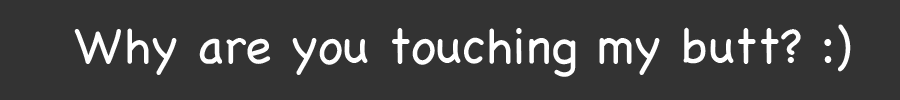
<style>
.page{position:relative;width:900px;height:100px;background:#333333}
.page>*{position:absolute;margin:0}
.t1{font:50px "Chalkboard";color:#ffffff}
</style>
<div class="page">
<p class="t1" style="left:74px;top:24px;width:777px;height:53px">Why are you touching my butt? :)</p>
</div>
